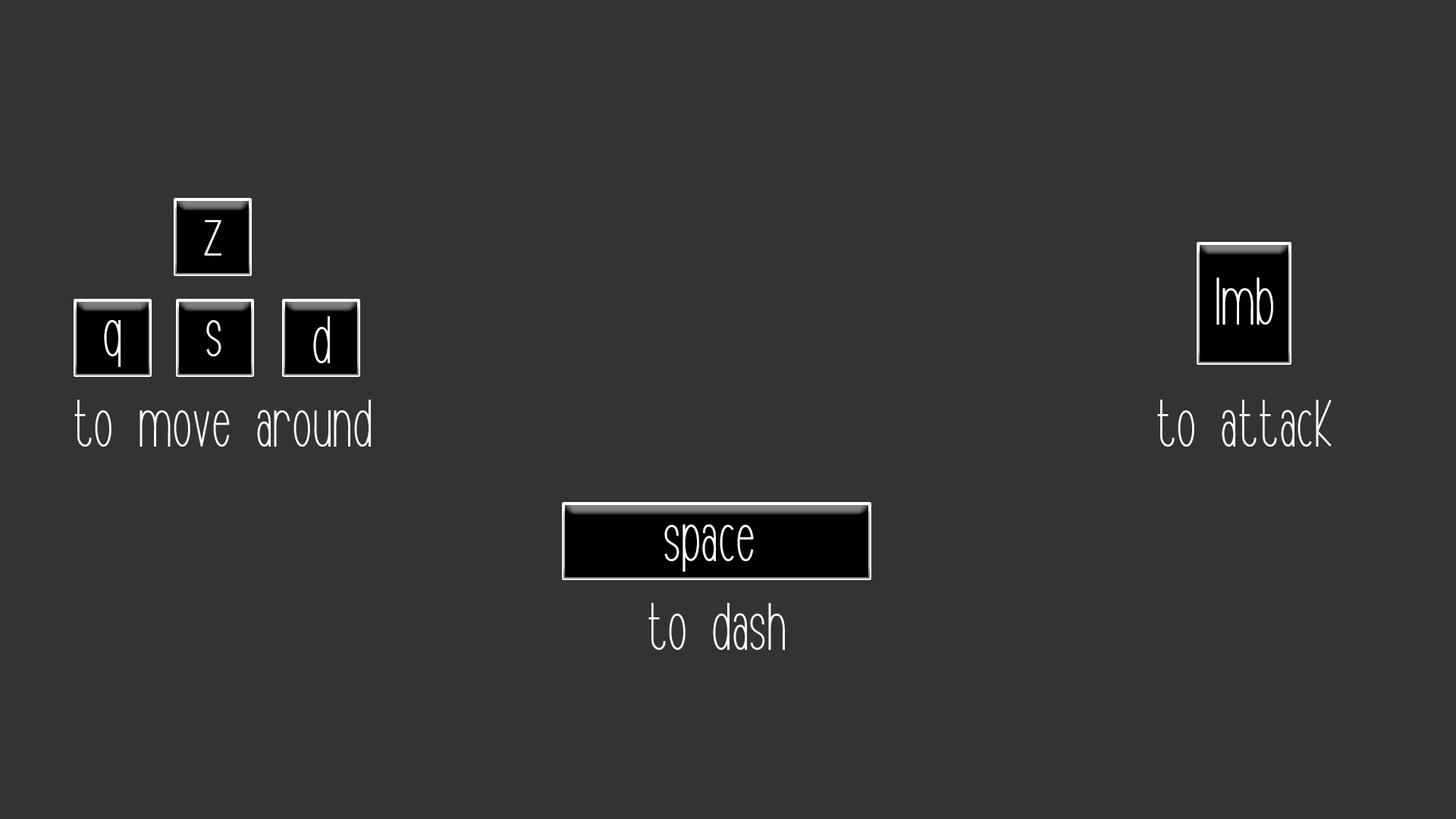
<style>
.page{position:relative;width:1456px;height:819px;background:#333333}
.page>*{position:absolute;margin:0}
.t1{font:75.8px "Cristal";color:#ffffff}
</style>
<div class="page">
<p class="t1" style="left:204px;top:220px;width:17px;height:36px">Z</p>
<p class="t1" style="left:1216px;top:278px;width:57px;height:47px">lmb</p>
<p class="t1" style="left:313px;top:316px;width:17px;height:47px">D</p>
<p class="t1" style="left:104px;top:320px;width:17px;height:47px">Q</p>
<p class="t1" style="left:206px;top:320px;width:15px;height:36px">s</p>
<p class="t1" style="left:74px;top:400px;width:297px;height:47px">To move around</p>
<p class="t1" style="left:1157px;top:400px;width:175px;height:47px">to attack</p>
<p class="t1" style="left:664px;top:524px;width:90px;height:48px">Space</p>
<p class="t1" style="left:648px;top:603px;width:137px;height:47px">To dash</p>
</div>
